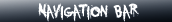
<style>
.page{position:relative;width:172px;height:22px}
.page>*{position:absolute;margin:0}
.t1{font:25px "YouMurdererBB";color:#ffffff}
</style>
<div class="page">
<p class="t1" style="left:38px;top:3px;width:101px;height:19px">Navigation Bar</p>
</div>
